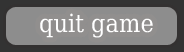
<style>
.page{position:relative;width:184px;height:52px;background:#8d8d8d}
.page>*{position:absolute;margin:0}
.t1{font:25px "DejaVuSerifCondensed";color:#ffffff}
</style>
<div class="page">
<p class="t1" style="left:40px;top:13px;width:113px;height:25px">quit game</p>
</div>
